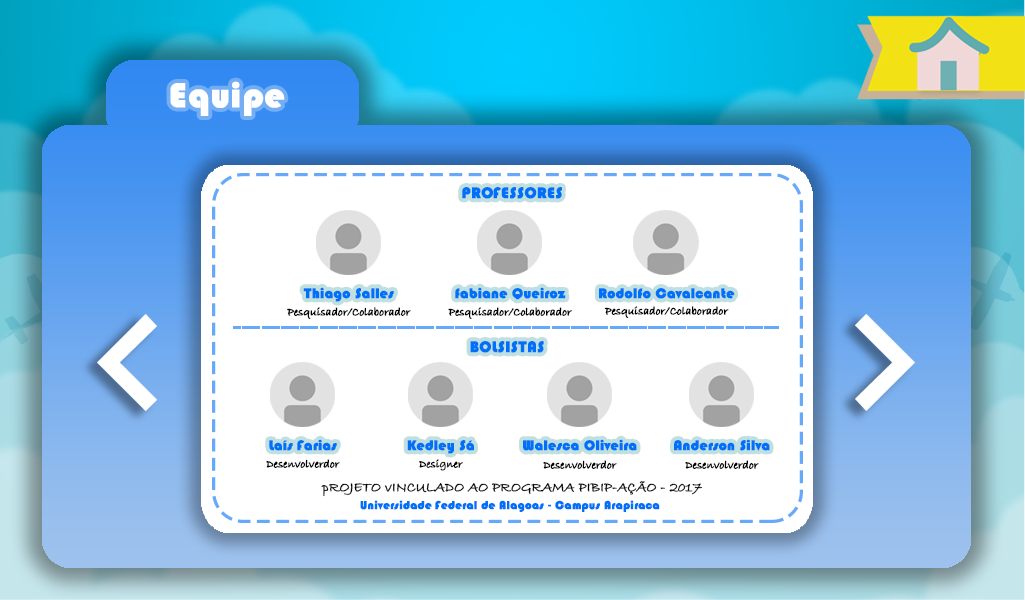
<style>
.page{position:relative;width:1025px;height:600px;background:#ffffff}
.page>*{position:absolute;margin:0}
.t1{font:36px "Blippo-Heavy";color:#ffffff;font-weight:bold}
.t2{font:16px "Blippo-Heavy";color:#0070f8;font-weight:bold}
.t3{font:14.5px "Blippo-Heavy";color:#0070f8;font-weight:bold}
.t4{font:11.3px "BradleyHandITC";color:#000000;font-weight:bold}
.t5{font:14px "BradleyHandITC";color:#000000;font-weight:bold}
.t6{font:12px "Blippo-Heavy";color:#0070f8;font-weight:bold}
</style>
<div class="page">
<p class="t1" style="left:170px;top:81px;width:115px;height:35px">Equipe</p>
<p class="t2" style="left:462px;top:187px;width:100px;height:12px">PROFESSORES</p>
<p class="t3" style="left:303px;top:287px;width:91px;height:15px">Thiago Salles</p>
<p class="t3" style="left:455px;top:287px;width:111px;height:13px">fabiane Queiroz</p>
<p class="t3" style="left:599px;top:288px;width:136px;height:11px">Rodolfo Cavalcante</p>
<p class="t4" style="left:287px;top:307px;width:124px;height:12px">Pesquisador/Colaborador</p>
<p class="t4" style="left:448px;top:307px;width:124px;height:12px">Pesquisador/Colaborador</p>
<p class="t4" style="left:604px;top:306px;width:125px;height:12px">Pesquisador/Colaborador</p>
<p class="t2" style="left:470px;top:341px;width:74px;height:12px">BOLSISTAS</p>
<p class="t3" style="left:269px;top:439px;width:68px;height:12px">Laís Farias</p>
<p class="t3" style="left:407px;top:440px;width:67px;height:14px">Kedley Sá</p>
<p class="t3" style="left:523px;top:439px;width:114px;height:12px">Walesca Oliveira</p>
<p class="t3" style="left:674px;top:439px;width:96px;height:12px">Anderson Silva</p>
<p class="t4" style="left:266px;top:459px;width:74px;height:9px">Desenvolverdor</p>
<p class="t4" style="left:419px;top:459px;width:44px;height:12px">Designer</p>
<p class="t4" style="left:543px;top:460px;width:74px;height:9px">Desenvolverdor</p>
<p class="t4" style="left:685px;top:460px;width:74px;height:9px">Desenvolverdor</p>
<p class="t5" style="left:321px;top:481px;width:382px;height:16px">pROJETO vINCULADO AO PROGRAMA PIBIP-AÇÃO - 2017</p>
<p class="t6" style="left:360px;top:500px;width:300px;height:12px">Universidade Federal de Alagoas - Campus Arapiraca</p>
</div>
